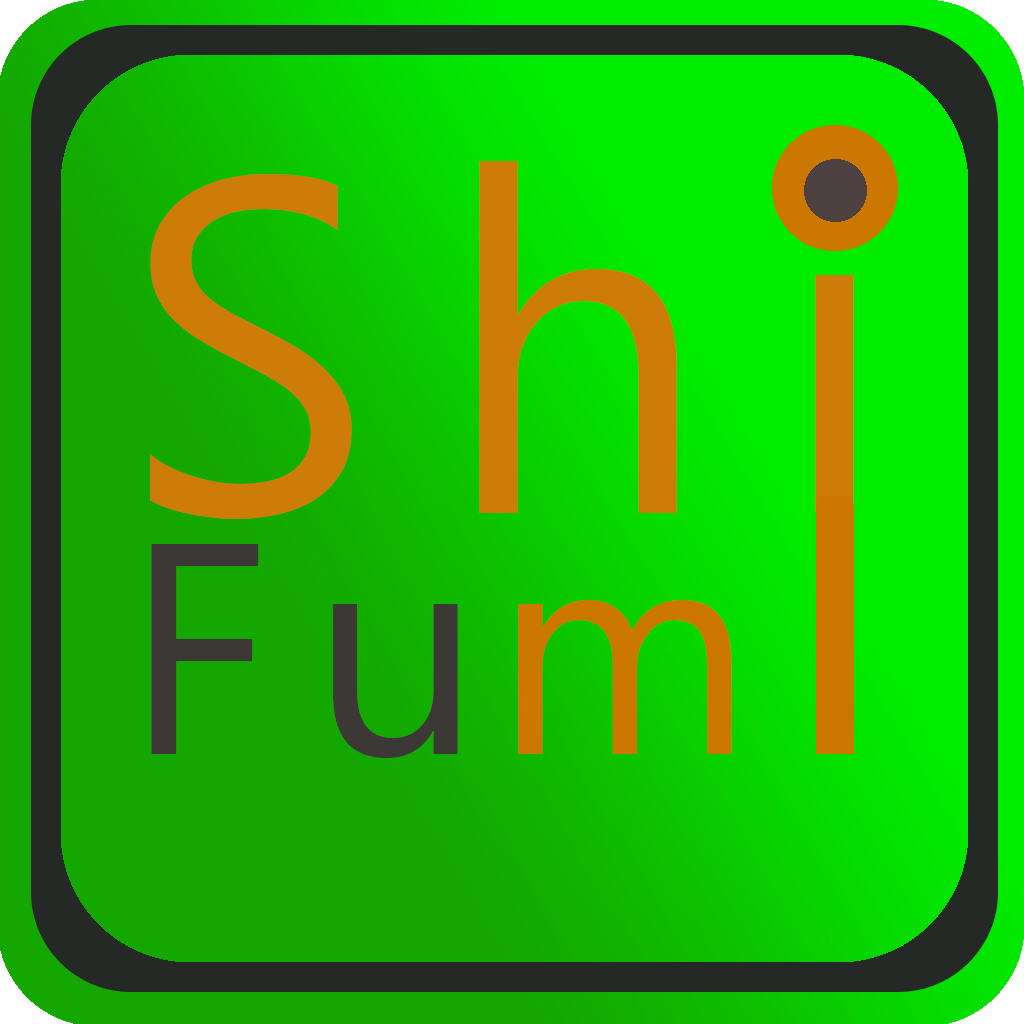
<style>
.page{position:relative;width:1024px;height:1024px}
.page>*{position:absolute;margin:0}
.t1{font:475px "LeelawadeeUI";letter-spacing:0.14em;color:#cd7c0a}
.t2{font:300px "LeelawadeeUI";letter-spacing:0.14em;color:#3b3835}
.t3{font:300px "LeelawadeeUI";letter-spacing:0.14em;color:#cc7800}
</style>
<div class="page">
<p class="t1" style="left:150px;top:161px;width:711px;height:358px">Shi</p>
<p class="t2" style="left:151px;top:544px;width:307px;height:214px">Fu</p>
<p class="t3" style="left:518px;top:535px;width:330px;height:219px">mi</p>
</div>
